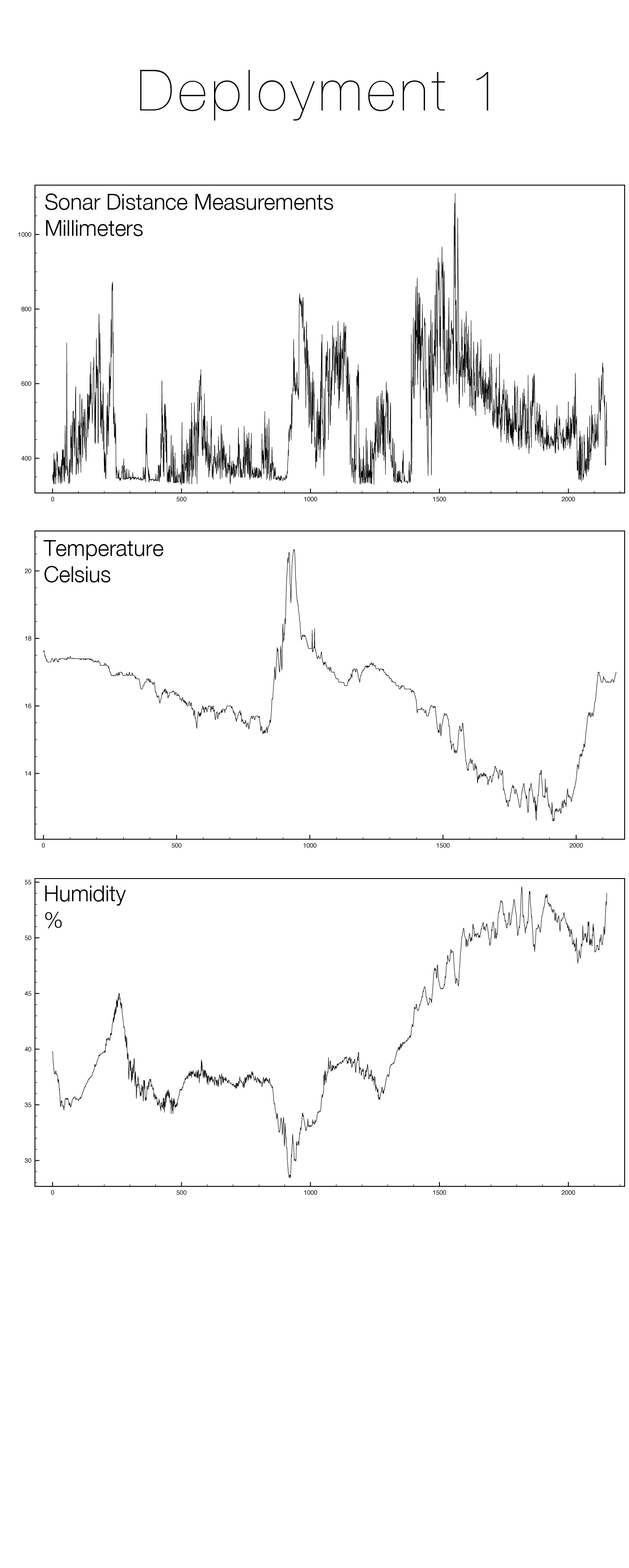
<style>
.page{position:relative;width:629px;height:1568px;background:#ffffff}
.page>*{position:absolute;margin:0}
.t1{font:56.8px "HelveticaNeue-UltraLight";letter-spacing:0.075em;color:#000000}
.t2{font:21.8px "HelveticaNeue-Light";color:#000000}
</style>
<div class="page">
<p class="t1" style="left:140px;top:70px;width:348px;height:51px">Deployment 1</p>
<p class="t2" style="left:45px;top:193px;width:288px;height:43px">Sonar Distance Measurements<br>Millimeters</p>
<p class="t2" style="left:43px;top:540px;width:120px;height:42px">Temperature<br>Celsius</p>
<p class="t2" style="left:45px;top:886px;width:81px;height:42px">Humidity<br>%</p>
</div>
